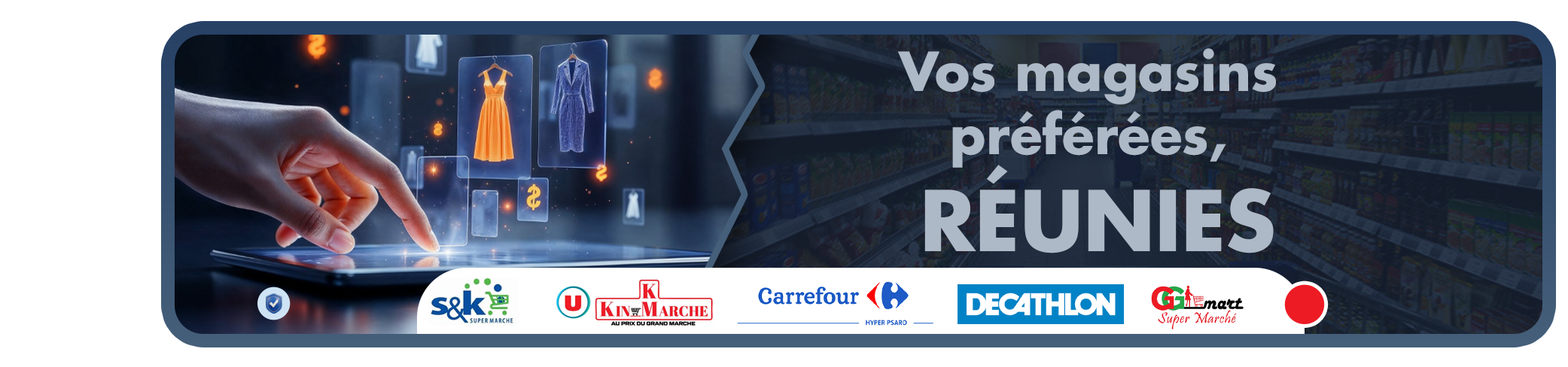
<style>
.page{position:relative;width:1568px;height:367px;background:#ffffff}
.page>*{position:absolute;margin:0}
.t1{font:52.5px "Futura-Bold";color:#aeb9c7}
.t2{font:81.4px "Futura-Bold";color:#aeb9c7;text-transform:uppercase}
</style>
<div class="page">
<p class="t1" style="left:898px;top:48px;width:378px;height:206px;text-align:center">Vos magasins <br>préférées, <br><span class="t2">réunies</span></p>
</div>
